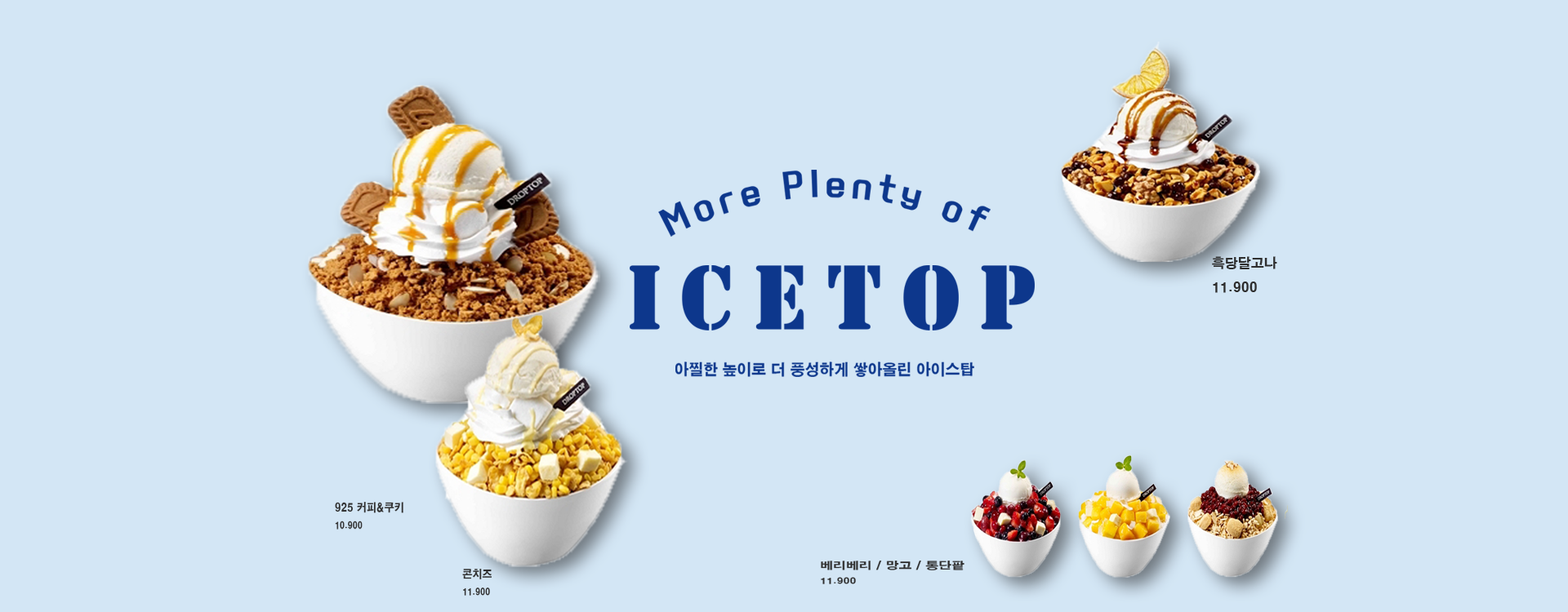
<style>
.page{position:relative;width:1568px;height:612px;background:#d3e6f5}
.page>*{position:absolute;margin:0}
.t1{font:29.9px "KoreanYNMYT-B";letter-spacing:0.2em;color:#0d378c}
.t2{font:13.1px/24.5px "HYgtrE";color:#2e2e2e}
.t3{font:89.8px "Stencil-BT";letter-spacing:0.2em;color:#0d378c}
.t4{font:15px "HYgtrE";color:#0d378c}
.t5{font:11.4px/17.1px "HYgtrE";color:#2e2e2e;scale:0.87 1}
.t6{font:9.1px/17.1px "HYgtrE";color:#2e2e2e;scale:0.87 1}
.t7{font:9.9px/14.8px "HYgtrE";color:#2e2e2e;scale:1.31 1}
.t8{font:7.9px/14.8px "HYgtrE";color:#2e2e2e;scale:1.31 1}
</style>
<div class="page">
<p class="t1" style="left:658px;top:170px;width:333px;height:67px">More Plenty of</p>
<p class="t2" style="left:1212px;top:256px;width:65px;height:37px">흑당달고나<br>11.900</p>
<p class="t3" style="left:630px;top:265px;width:405px;height:66px">ICETOP</p>
<p class="t4" style="left:675px;top:362px;width:299px;height:15px">아찔한 높이로 더 풍성하게 쌓아올린 아이스탑</p>
<p class="t5" style="left:335px;top:502px;width:68px;height:28px">925 커피&amp;쿠키<br><span class="t6">10.900</span></p>
<p class="t6" style="left:462px;top:569px;width:30px;height:27px"><span class="t5">콘치즈<br></span>11.900</p>
<p class="t7" style="left:821px;top:561px;width:143px;height:24px">베리베리 / 망고 / 통단팥<br><span class="t8">11.900</span></p>
</div>
